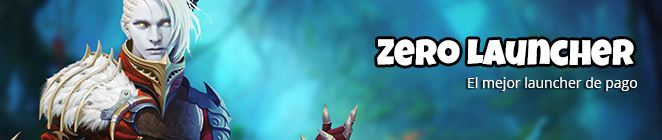
<style>
.page{position:relative;width:662px;height:140px}
.page>*{position:absolute;margin:0}
.t1{font:36px "LuckiestGuy-Regular";color:#ffffff}
.t2{font:14px "OpenSans";color:#ffffff}
</style>
<div class="page">
<p class="t1" style="left:377px;top:39px;width:257px;height:27px">Zero Launcher</p>
<p class="t2" style="left:468px;top:77px;width:169px;height:14px">El mejor launcher de pago</p>
</div>
